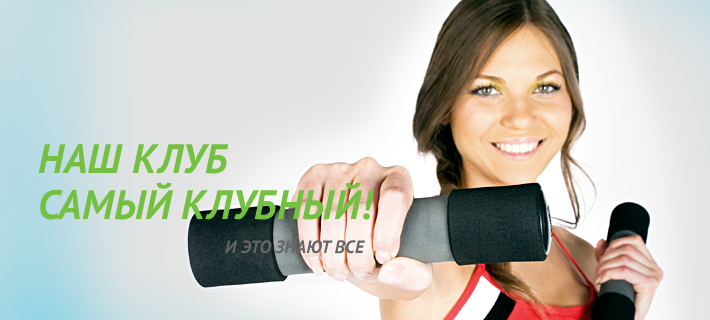
<style>
.page{position:relative;width:710px;height:320px}
.page>*{position:absolute;margin:0}
.t1{font:41px/46px "PTSans-BoldItalic";color:#74c043;text-transform:uppercase}
</style>
<div class="page">
<p class="t1" style="left:38px;top:144px;width:337px;height:76px">Наш клуб<br>самый клубный!</p>
</div>
